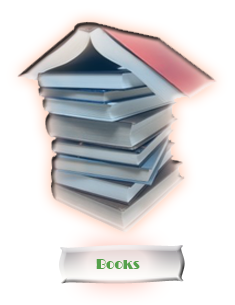
<style>
.page{position:relative;width:235px;height:305px;background:#ffffff}
.page>*{position:absolute;margin:0}
.t1{font:14px "Broadway";color:#55a14b}
</style>
<div class="page">
<p class="t1" style="left:96px;top:259px;width:44px;height:10px">Books</p>
</div>
